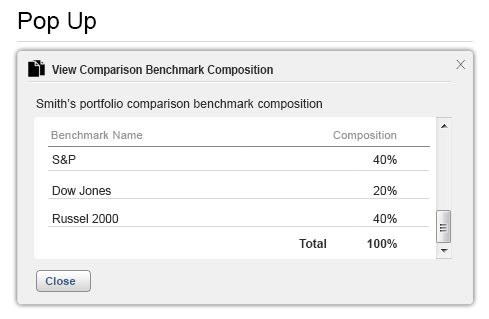
<style>
.page{position:relative;width:489px;height:319px;background:#ffffff}
.page>*{position:absolute;margin:0}
.t1{font:24px "ArialMT";color:#000000}
.t2{font:12px "Arial-BoldMT";color:#2e2e2e;scale:0.9 1}
.t3{font:18px "GothamThin";color:#494949}
.t4{font:12px "ArialMT";letter-spacing:0.01em;color:#2e2e2e}
.t5{font:11px "ArialMT";letter-spacing:0.025em;color:#949494}
.t6{font:12px "ArialMT";color:#2e2e2e}
.t7{font:12px "Arial-BoldMT";color:#2e2e2e}
.t8{font:11px "Arial-BoldMT";letter-spacing:0.01em;color:#3d5e87}
</style>
<div class="page">
<p class="t1" style="left:18px;top:12px;width:78px;height:22px">Pop Up</p>
<p class="t2" style="left:52px;top:65px;width:221px;height:11px">View Comparison Benchmark Composition</p>
<p class="t3" style="left:456px;top:60px;width:9px;height:9px">x</p>
<p class="t4" style="left:36px;top:99px;width:286px;height:11px">Smith’s portfolio comparison benchmark composition</p>
<p class="t5" style="left:51px;top:131px;width:346px;height:10px">Benchmark Name              Composition</p>
<p class="t6" style="left:52px;top:155px;width:345px;height:9px">S&amp;P                   40%</p>
<p class="t6" style="left:52px;top:186px;width:345px;height:9px">Dow Jones                 20%</p>
<p class="t6" style="left:52px;top:214px;width:345px;height:9px">Russel 2000                 40%</p>
<p class="t7" style="left:299px;top:239px;width:98px;height:9px">Total            100%</p>
<p class="t8" style="left:45px;top:277px;width:31px;height:8px">Close</p>
</div>
